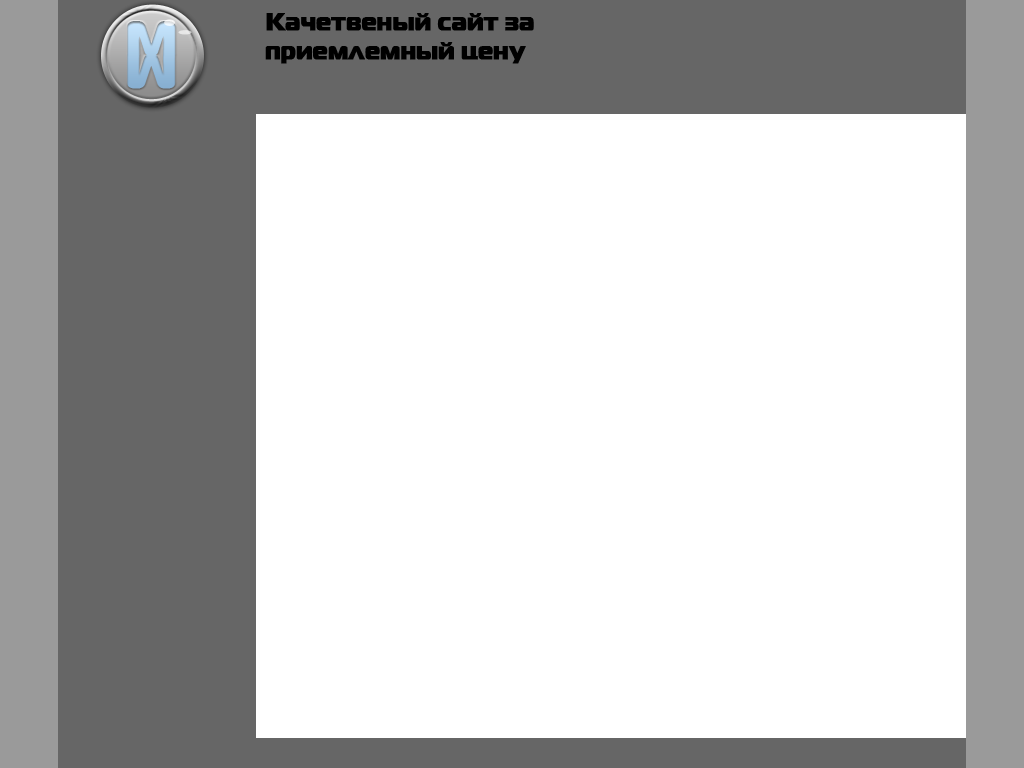
<style>
.page{position:relative;width:1024px;height:768px;background:#ffffff}
.page>*{position:absolute;margin:0}
.t1{font:24px "ft40-Roman";color:#000000;font-weight:bold}
</style>
<div class="page">
<p class="t1" style="left:265px;top:13px;width:269px;height:51px">Качетвеный сайт за<br>приемлемный цену</p>
</div>
